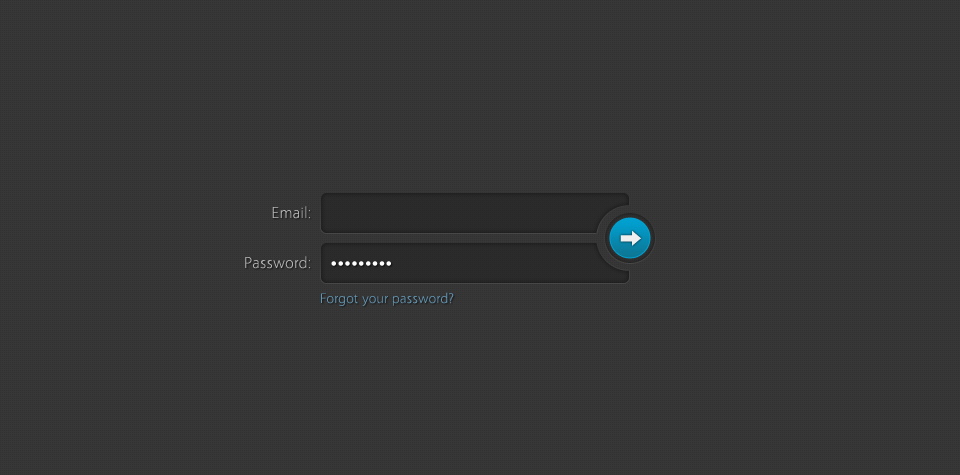
<style>
.page{position:relative;width:960px;height:475px;background:#373737}
.page>*{position:absolute;margin:0}
.t1{font:16px "Vegur-Light";letter-spacing:0.02em;color:#b5b5b5}
.t2{font:16px "Arial-BoldMT";letter-spacing:0.08em;color:#ffffff}
.t3{font:14px "Vegur-Light";letter-spacing:0.02em;color:#6296b4}
</style>
<div class="page">
<p class="t1" style="left:272px;top:206px;width:38px;height:13px">Email:</p>
<p class="t1" style="left:245px;top:256px;width:65px;height:13px">Password:</p>
<p class="t2" style="left:331px;top:261px;width:60px;height:5px">•••••••••</p>
<p class="t3" style="left:321px;top:292px;width:133px;height:14px">Forgot your password?</p>
</div>
